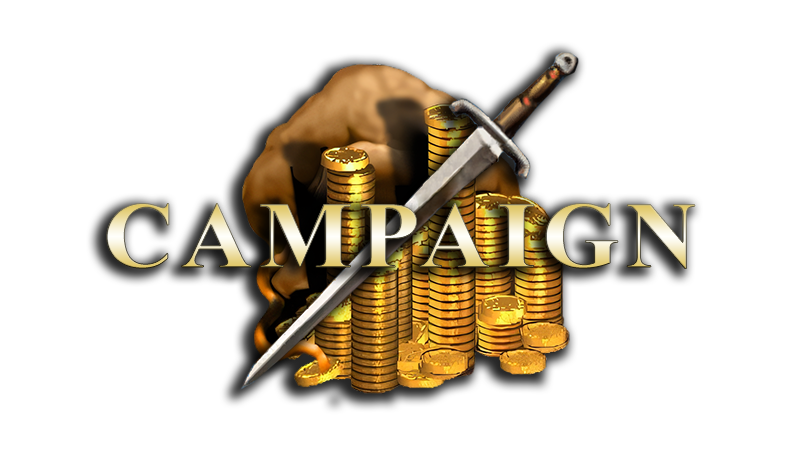
<style>
.page{position:relative;width:800px;height:472px;background:#ffffff}
.page>*{position:absolute;margin:0}
.t1{font:94px "TimesNewRomanPS-BoldMT";letter-spacing:0.07em;scale:1.05 1}
</style>
<div class="page">
<p class="t1" style="left:106px;top:203px;width:589px;height:66px">CAMPAIGN</p>
</div>
